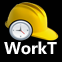
<style>
.page{position:relative;width:62px;height:62px;background:#010101}
.page>*{position:absolute;margin:0}
.t1{font:16.9px "SegoeWP-Bold";letter-spacing:-0.01em;color:#ffffff}
</style>
<div class="page">
<p class="t1" style="left:4px;top:41px;width:53px;height:14px">WorkT</p>
</div>
